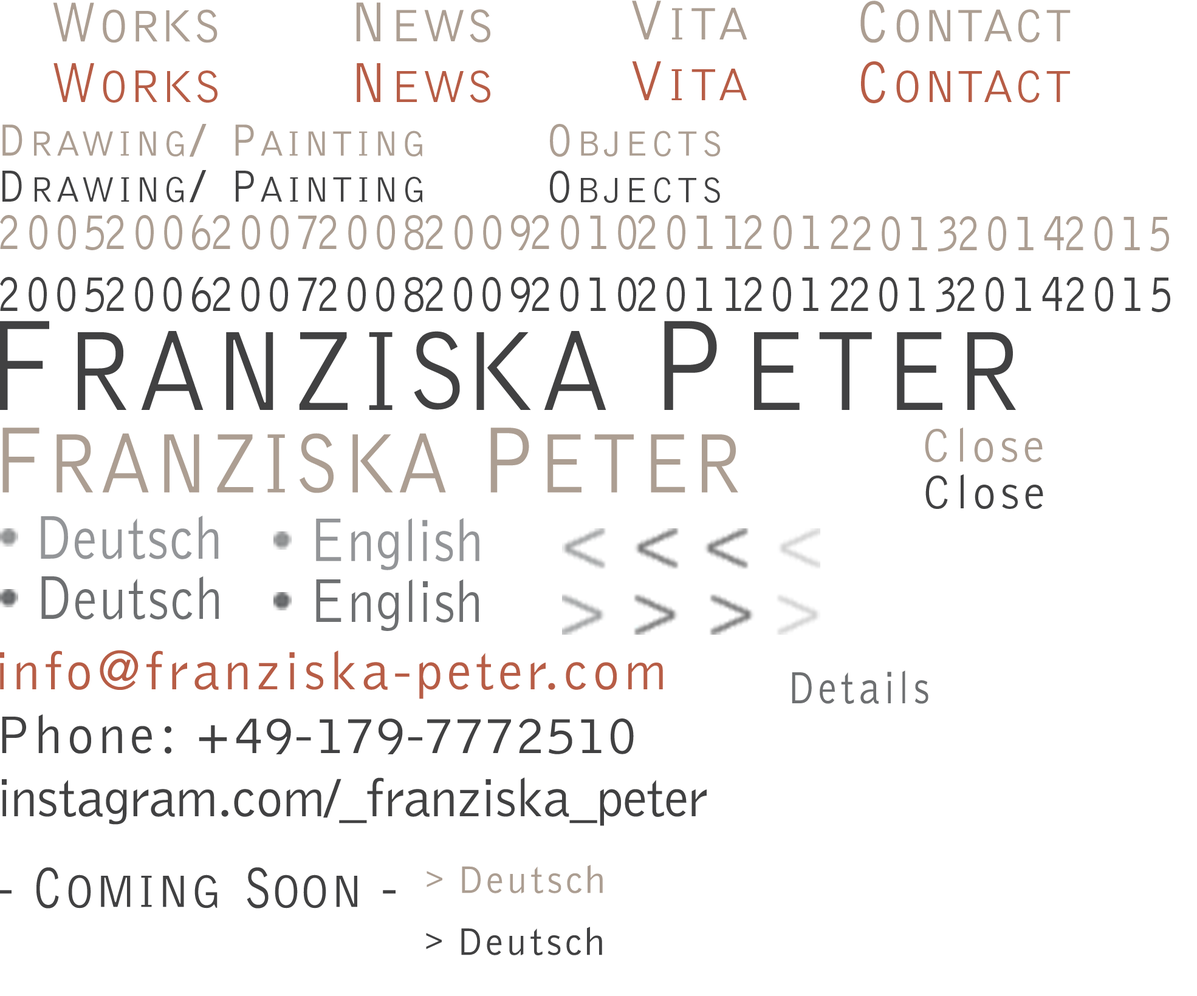
<style>
.page{position:relative;width:1197px;height:996px;background:#ffffff}
.page>*{position:absolute;margin:0}
.t1{font:58.1px "BellGothicStd-Light";letter-spacing:0.06em;color:#ac9e92;font-variant:small-caps;scale:0.84 1}
.t2{font:66.8px "BellGothicStd-Light";letter-spacing:0.02em;color:#ac9e92;font-variant:small-caps}
.t3{font:65.5px "BellGothicStd-Light";color:#ac9e92;font-variant:small-caps}
.t4{font:66.8px "BellGothicStd-Light";letter-spacing:0.03em;color:#ac9e92;font-variant:small-caps}
.t5{font:66.8px "BellGothicStd-Light";color:#ac9e92;font-variant:small-caps}
.t6{font:58.1px "BellGothicStd-Light";letter-spacing:0.04em;color:#ac9e92;font-variant:small-caps;scale:0.92 1}
.t7{font:66.8px "BellGothicStd-Light";letter-spacing:0.06em;color:#ac9e92;font-variant:small-caps}
.t8{font:58.1px "BellGothicStd-Light";letter-spacing:0.07em;color:#ac9e92;font-variant:small-caps;scale:0.92 1}
.t9{font:66.8px "BellGothicStd-Light";letter-spacing:0.025em;color:#ac9e92;font-variant:small-caps}
.t10{font:59.5px "BellGothicStd-Light";letter-spacing:0.08em;color:#ac9e92;font-variant:small-caps;scale:0.9 1}
.t11{font:66.8px "BellGothicStd-Light";letter-spacing:0.02em;color:#b75d46;font-variant:small-caps}
.t12{font:58.1px "BellGothicStd-Light";letter-spacing:0.06em;color:#b75d46;font-variant:small-caps;scale:0.84 1}
.t13{font:68.2px "BellGothicStd-Light";letter-spacing:0.02em;color:#b75d46;font-variant:small-caps}
.t14{font:66.8px "BellGothicStd-Light";color:#b75d46;font-variant:small-caps}
.t15{font:58.1px "BellGothicStd-Light";letter-spacing:0.04em;color:#b75d46;font-variant:small-caps;scale:0.92 1}
.t16{font:66.8px "BellGothicStd-Light";letter-spacing:0.06em;color:#b75d46;font-variant:small-caps}
.t17{font:58.1px "BellGothicStd-Light";letter-spacing:0.07em;color:#b75d46;font-variant:small-caps;scale:0.92 1}
.t18{font:66.8px "BellGothicStd-Light";letter-spacing:0.025em;color:#b75d46;font-variant:small-caps}
.t19{font:60.1px "BellGothicStd-Light";letter-spacing:0.08em;color:#b75d46;font-variant:small-caps;scale:0.89 1}
.t20{font:51.6px "BellGothicStd-Light";letter-spacing:0.08em;color:#ac9e92;font-variant:small-caps}
.t21{font:46.5px "BellGothicStd-Light";letter-spacing:0.1em;color:#ac9e92;font-variant:small-caps;scale:0.89 1}
.t22{font:46.5px "BellGothicStd-Light";letter-spacing:0.1em;color:#ac9e92;font-variant:small-caps;scale:1.11 1}
.t23{font:46.5px "BellGothicStd-Light";letter-spacing:0.06em;color:#ac9e92;font-variant:small-caps;scale:0.89 1}
.t24{font:51.6px "BellGothicStd-Light";letter-spacing:0.08em;color:#414142;font-variant:small-caps}
.t25{font:46.5px "BellGothicStd-Light";letter-spacing:0.1em;color:#414142;font-variant:small-caps;scale:0.89 1}
.t26{font:46.5px "BellGothicStd-Light";letter-spacing:0.1em;color:#414142;font-variant:small-caps;scale:1.11 1}
.t27{font:46.5px "BellGothicStd-Light";letter-spacing:0.06em;color:#414142;font-variant:small-caps;scale:0.89 1}
.t28{font:54.7px "BellGothicStd-Light";letter-spacing:0.1em;color:#ac9e92;font-variant:small-caps;scale:0.8 1}
.t29{font:54.7px "BellGothicStd-Light";letter-spacing:0.1em;color:#ac9e92;font-variant:small-caps;scale:0.77 1}
.t30{font:54.7px "BellGothicStd-Light";letter-spacing:0.1em;color:#414142;font-variant:small-caps;scale:0.8 1}
.t31{font:167.1px "BellGothicStd-Light";letter-spacing:0.04em;color:#414142;font-variant:small-caps;scale:0.9 1}
.t32{font:133.7px "BellGothicStd-Light";letter-spacing:0.04em;color:#414142;font-variant:small-caps;scale:0.9 1}
.t33{font:158.7px "BellGothicStd-Light";letter-spacing:-0.06em;color:#414142;font-variant:small-caps;scale:0.95 1}
.t34{font:167.1px "BellGothicStd-Light";letter-spacing:0.06em;color:#414142;font-variant:small-caps;scale:0.9 1}
.t35{font:133.7px "BellGothicStd-Light";letter-spacing:0.1em;color:#414142;font-variant:small-caps;scale:0.9 1}
.t36{font:124.5px "BellGothicStd-Light";letter-spacing:0.02em;color:#ac9e92;font-variant:small-caps;scale:0.9 1}
.t37{font:97.2px "BellGothicStd-Light";color:#ac9e92;font-variant:small-caps;scale:0.9 1}
.t38{font:120.8px "BellGothicStd-Light";letter-spacing:0.02em;color:#ac9e92;font-variant:small-caps;scale:0.93 1}
.t39{font:48.6px "BellGothicStd-Light";letter-spacing:0.08em;color:#ac9e92}
.t40{font:48.6px "BellGothicStd-Light";letter-spacing:0.08em;color:#414142}
.t41{font:60.8px "BellGothicStd-Light";letter-spacing:0.02em;color:#939598;scale:0.9 1}
.t42{font:63.8px "BellGothicStd-Light";letter-spacing:0.02em;color:#939598;scale:0.9 1}
.t43{font:60.8px "BellGothicStd-Light";letter-spacing:0.02em;color:#6d6f71;scale:0.9 1}
.t44{font:63.8px "BellGothicStd-Light";letter-spacing:0.02em;color:#6d6f71;scale:0.9 1}
.t45{font:54.7px "BellGothicStd-Light";letter-spacing:0.08em;color:#b75d46}
.t46{font:46.5px "BellGothicStd-Light";letter-spacing:0.1em;color:#6d6f71;scale:0.89 1}
.t47{font:54.7px "BellGothicStd-Light";color:#414142}
.t48{font:54.7px "BellGothicStd-Light";letter-spacing:0.08em;color:#414142}
.t49{font:54.7px "BellGothicStd-Light";letter-spacing:0.04em;color:#414142}
.t50{font:54.7px "BellGothicStd-Light";letter-spacing:-0.01em;color:#414142}
.t51{font:66.8px "BellGothicStd-Light";letter-spacing:0.02em;color:#414142;font-variant:small-caps}
.t52{font:58.1px "BellGothicStd-Light";letter-spacing:0.06em;color:#414142;font-variant:small-caps;scale:0.84 1}
.t53{font:58.1px "BellGothicStd-Light";letter-spacing:-0.02em;color:#414142;font-variant:small-caps;scale:0.84 1}
.t54{font:66.8px "BellGothicStd-Light";color:#414142;font-variant:small-caps}
.t55{font:39.5px "BellGothicStd-Light";letter-spacing:0.08em;color:#ac9e92}
.t56{font:30.4px "BellGothicStd-Light";letter-spacing:0.08em;color:#ac9e92}
.t57{font:39.5px "BellGothicStd-Light";letter-spacing:0.04em;color:#ac9e92}
.t58{font:39.5px "BellGothicStd-Light";letter-spacing:0.08em;color:#ac9e92;scale:1.06 1}
.t59{font:39.5px "BellGothicStd-Light";letter-spacing:0.08em;color:#414142}
.t60{font:30.4px "BellGothicStd-Light";letter-spacing:0.08em;color:#414142}
.t61{font:39.5px "BellGothicStd-Light";letter-spacing:0.04em;color:#414142}
.t62{font:39.5px "BellGothicStd-Light";letter-spacing:0.08em;color:#414142;scale:1.06 1}
</style>
<div class="page">
<p class="t1" style="left:53px;top:2px;width:164px;height:41px">W<span class="t2">o</span><span class="t3">r</span><span class="t4">k</span><span class="t2">s</span></p>
<p class="t5" style="left:356px;top:2px;width:134px;height:41px"><span class="t6">N</span><span class="t2">e</span>ws</p>
<p class="t7" style="left:632px;top:1px;width:115px;height:38px"><span class="t8">V</span>it<span class="t9">a</span></p>
<p class="t2" style="left:860px;top:1px;width:210px;height:42px"><span class="t10">C</span>ontact</p>
<p class="t11" style="left:53px;top:63px;width:164px;height:40px"><span class="t12">W</span>o<span class="t13">r</span>ks</p>
<p class="t14" style="left:357px;top:63px;width:133px;height:40px"><span class="t15">N</span><span class="t11">e</span>ws</p>
<p class="t16" style="left:632px;top:61px;width:115px;height:39px"><span class="t17">V</span>it<span class="t18">a</span></p>
<p class="t11" style="left:861px;top:61px;width:209px;height:42px"><span class="t19">C</span>ontact</p>
<p class="t20" style="left:2px;top:124px;width:420px;height:33px"><span class="t21">D</span>rawing<span class="t22">/ </span><span class="t23">P</span>ainting</p>
<p class="t20" style="left:550px;top:124px;width:171px;height:33px"><span class="t21">O</span>bjects</p>
<p class="t24" style="left:2px;top:170px;width:420px;height:32px"><span class="t25">D</span>rawing<span class="t26">/ </span><span class="t27">P</span>ainting</p>
<p class="t24" style="left:550px;top:171px;width:170px;height:32px"><span class="t25">O</span>bjects</p>
<p class="t28" style="left:0px;top:215px;width:104px;height:35px">2005</p>
<p class="t28" style="left:106px;top:215px;width:104px;height:35px">200<span class="t29">6</span></p>
<p class="t28" style="left:213px;top:215px;width:104px;height:35px">2007</p>
<p class="t28" style="left:319px;top:215px;width:104px;height:35px">2008</p>
<p class="t28" style="left:425px;top:215px;width:105px;height:35px">2009</p>
<p class="t28" style="left:532px;top:215px;width:104px;height:35px">2010</p>
<p class="t28" style="left:638px;top:215px;width:103px;height:35px">2011</p>
<p class="t28" style="left:744px;top:215px;width:104px;height:35px">2012</p>
<p class="t28" style="left:853px;top:216px;width:103px;height:36px">2013</p>
<p class="t28" style="left:959px;top:216px;width:105px;height:35px">2014</p>
<p class="t28" style="left:1066px;top:216px;width:103px;height:36px">2015</p>
<p class="t30" style="left:0px;top:277px;width:104px;height:35px">2005</p>
<p class="t30" style="left:106px;top:277px;width:105px;height:35px">2006</p>
<p class="t30" style="left:213px;top:277px;width:104px;height:35px">2007</p>
<p class="t30" style="left:319px;top:277px;width:104px;height:35px">2008</p>
<p class="t30" style="left:425px;top:277px;width:105px;height:35px">2009</p>
<p class="t30" style="left:532px;top:277px;width:104px;height:35px">2010</p>
<p class="t30" style="left:638px;top:277px;width:103px;height:35px">2011</p>
<p class="t30" style="left:744px;top:277px;width:104px;height:35px">2012</p>
<p class="t30" style="left:851px;top:277px;width:103px;height:35px">2013</p>
<p class="t30" style="left:957px;top:277px;width:105px;height:35px">2014</p>
<p class="t30" style="left:1066px;top:277px;width:104px;height:35px">2015</p>
<p class="t31" style="left:0px;top:321px;width:1016px;height:89px"><span class="t32">F</span>ranzi<span class="t33">s</span><span class="t34">k</span>a <span class="t35">P</span>eter</p>
<p class="t36" style="left:2px;top:428px;width:736px;height:65px"><span class="t37">F</span>ranzi<span class="t38">s</span>ka <span class="t37">P</span>eter</p>
<p class="t39" style="left:925px;top:428px;width:118px;height:34px">Close</p>
<p class="t40" style="left:925px;top:474px;width:118px;height:35px">Close</p>
<p class="t41" style="left:41px;top:516px;width:178px;height:44px"><span class="t42">D</span>eutsch</p>
<p class="t41" style="left:316px;top:518px;width:163px;height:52px"><span class="t42">E</span>nglish</p>
<p class="t43" style="left:41px;top:577px;width:178px;height:43px"><span class="t44">D</span>eutsch</p>
<p class="t43" style="left:316px;top:580px;width:163px;height:51px"><span class="t44">E</span>nglish</p>
<p class="t45" style="left:0px;top:650px;width:663px;height:49px">info@franziska-peter.com</p>
<p class="t46" style="left:792px;top:671px;width:136px;height:33px">Details</p>
<p class="t47" style="left:2px;top:714px;width:632px;height:41px"><span class="t48">Phone: +</span>49<span class="t49">-</span>179-7772510</p>
<p class="t50" style="left:2px;top:778px;width:705px;height:48px">instagram.com/_franziska_peter</p>
<p class="t51" style="left:0px;top:868px;width:395px;height:41px"><span class="t52"> - C</span>oming <span class="t53">S</span><span class="t54">o</span>on<span class="t52"> -</span></p>
<p class="t55" style="left:426px;top:865px;width:177px;height:29px"><span class="t56">&gt; </span>Deuts<span class="t57">c</span><span class="t58">h</span></p>
<p class="t59" style="left:426px;top:927px;width:176px;height:29px"><span class="t60">&gt; </span>Deuts<span class="t61">c</span><span class="t62">h</span></p>
</div>
